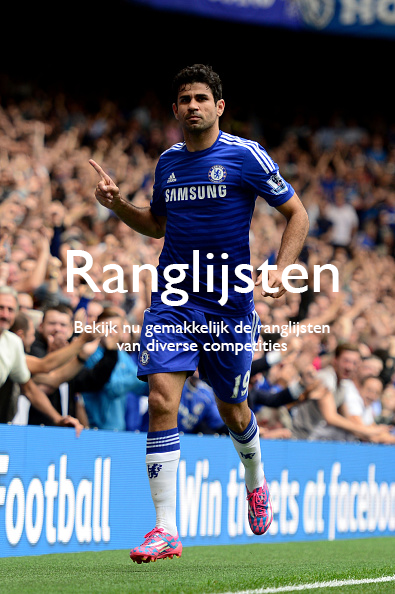
<style>
.page{position:relative;width:395px;height:594px}
.page>*{position:absolute;margin:0}
.t1{font:60.9px "GillSansMT";color:#ffffff;scale:1.07 1}
.t2{font:18px/18px "GillSansMT";color:#ffffff}
</style>
<div class="page">
<p class="t1" style="left:67px;top:250px;width:272px;height:56px">Ranglijsten</p>
<p class="t2" style="left:74px;top:321px;width:256px;height:34px;text-align:center">Bekijk nu gemakkelijk de ranglijsten van diverse competities</p>
</div>
